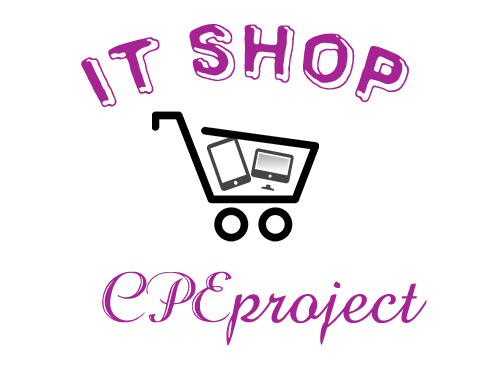
<style>
.page{position:relative;width:500px;height:375px;background:#ffffff}
.page>*{position:absolute;margin:0}
.t1{font:80px "Universedge";color:#a62393}
.t2{font:80px "BrockScript";color:#a62393}
.t3{font:80px "RechtmanScript";color:#a62393}
</style>
<div class="page">
<p class="t1" style="left:81px;top:24px;width:328px;height:84px">IT SHOP</p>
<p class="t2" style="left:102px;top:271px;width:325px;height:75px"><span class="t3">CPE</span>project</p>
</div>
